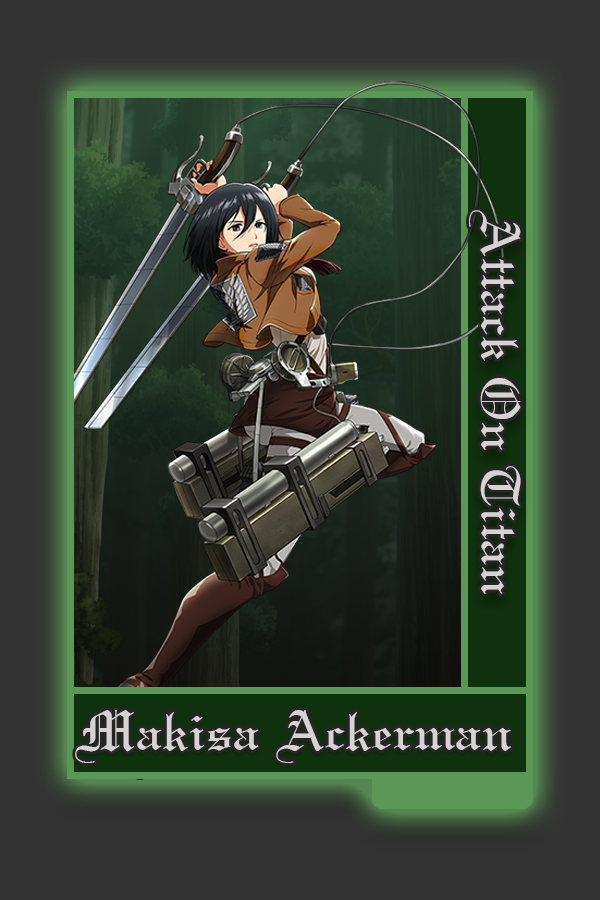
<style>
.page{position:relative;width:600px;height:900px;background:#333333}
.page>*{position:absolute;margin:0}
.t1{font:58.3px "Linotext";color:#d7d4d4}
.t2{font:60.3px "Linotext";color:#d7d4d4}
</style>
<div class="page">
<p class="t1" style="left:469px;top:210px;width:52px;height:384px;rotate:90deg">Attack On Titan</p>
<p class="t2" style="left:75px;top:710px;width:436px;height:53px">Makisa Ackerman</p>
</div>
